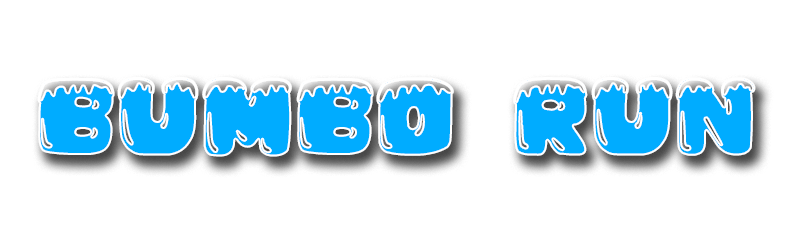
<style>
.page{position:relative;width:792px;height:235px;background:#ffffff}
.page>*{position:absolute;margin:0}
.t1{font:119px "Iceberg-Regular";color:#00acff}
</style>
<div class="page">
<p class="t1" style="left:37px;top:77px;width:719px;height:80px">bumbo run</p>
</div>
